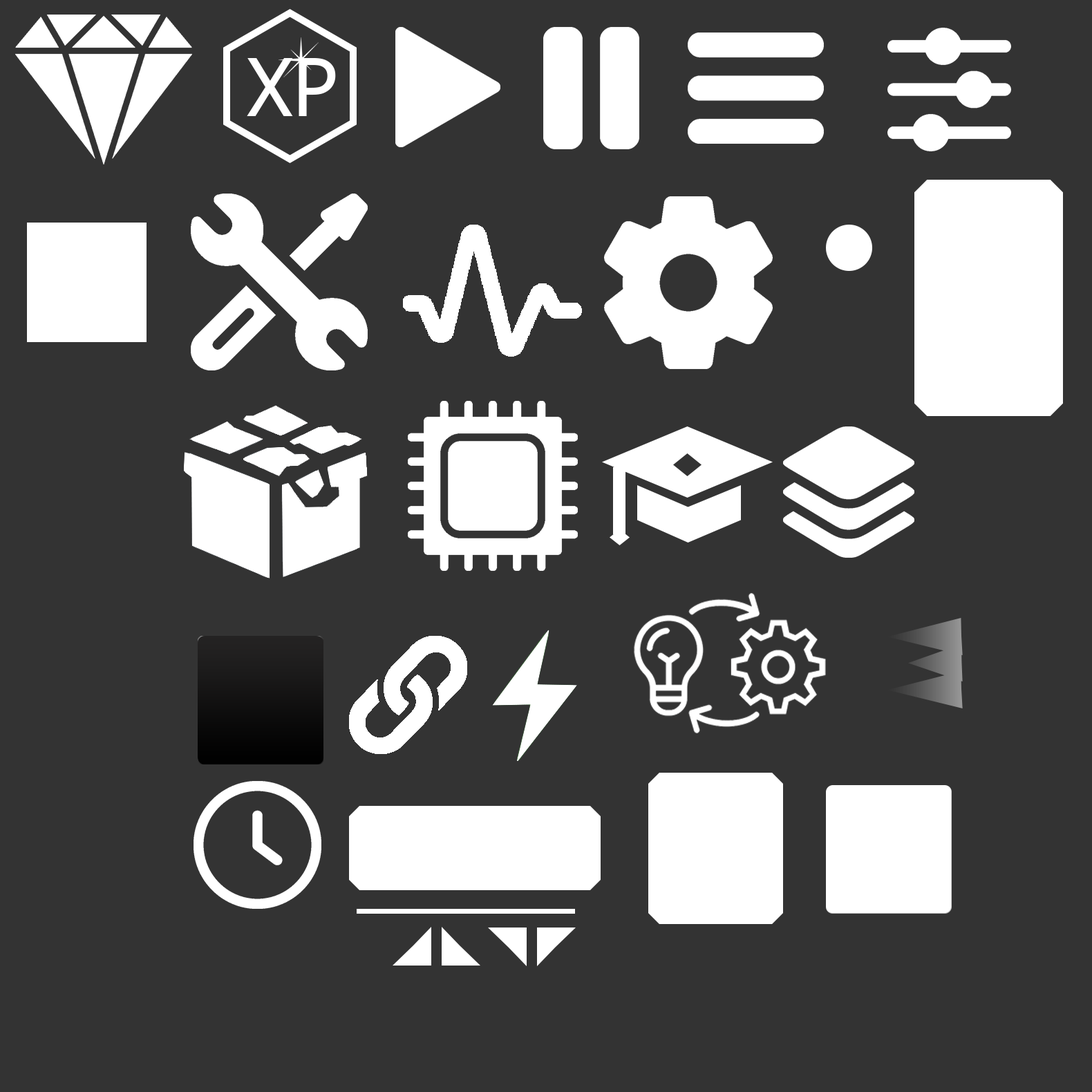
<style>
.page{position:relative;width:1092px;height:1092px;background:#333333}
.page>*{position:absolute;margin:0}
.t1{font:79.2px "Tahoma";color:#ffffff}
</style>
<div class="page">
<p class="t1" style="left:247px;top:58px;width:89px;height:58px">XP</p>
</div>
